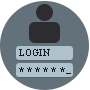
<style>
.page{position:relative;width:90px;height:90px;background:#63717a}
.page>*{position:absolute;margin:0}
.t1{font:10px "TimesNewRomanPSMT";color:#151b1d}
.t2{font:15px "ArialNarrow-Bold";color:#151b1d}
</style>
<div class="page">
<p class="t1" style="left:19px;top:49px;width:31px;height:7px">LOGIN</p>
<p class="t2" style="left:19px;top:67px;width:46px;height:5px">* * * * * *</p>
</div>
